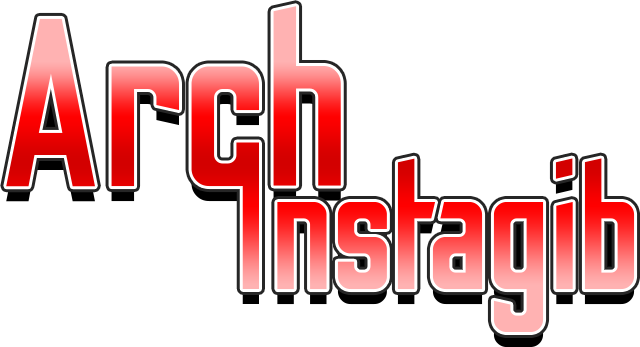
<style>
.page{position:relative;width:640px;height:347px;background:#ffffff}
.page>*{position:absolute;margin:0}
.t1{font:239.2px "OdibeeSans-Regular"}
.t2{font:174.4px "OdibeeSans-Regular"}
</style>
<div class="page">
<p class="t1" style="left:6px;top:6px;width:335px;height:181px">Arch</p>
<p class="t2" style="left:242px;top:158px;width:393px;height:174px">Instagib</p>
</div>
